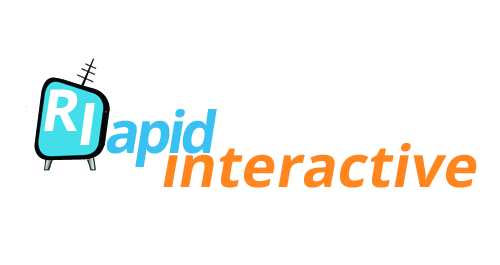
<style>
.page{position:relative;width:500px;height:265px;background:#ffffff}
.page>*{position:absolute;margin:0}
.t1{font:58px "OpenSans-Bold";letter-spacing:-0.075em;color:#ffffff;font-style:italic}
.t2{font:58.9px "OpenSans-Bold";letter-spacing:-0.075em;color:#ffffff;font-style:italic}
.t3{font:58px "OpenSans-Bold";letter-spacing:-0.075em;color:#39c1f1;font-style:italic}
.t4{font:58px "OpenSans-Bold";color:#ff861f;font-style:italic}
</style>
<div class="page">
<p class="t1" style="left:44px;top:89px;width:34px;height:42px">R</p>
<p class="t2" style="left:80px;top:103px;width:15px;height:42px">I</p>
<p class="t3" style="left:106px;top:109px;width:111px;height:58px">apid</p>
<p class="t4" style="left:163px;top:143px;width:314px;height:45px">interactive</p>
</div>
